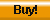
<style>
.page{position:relative;width:50px;height:20px;background:#ed9702}
.page>*{position:absolute;margin:0}
.t1{font:12px "Arial-BoldMT";color:#101010}
</style>
<div class="page">
<p class="t1" style="left:14px;top:5px;width:23px;height:11px">Buy!</p>
</div>
